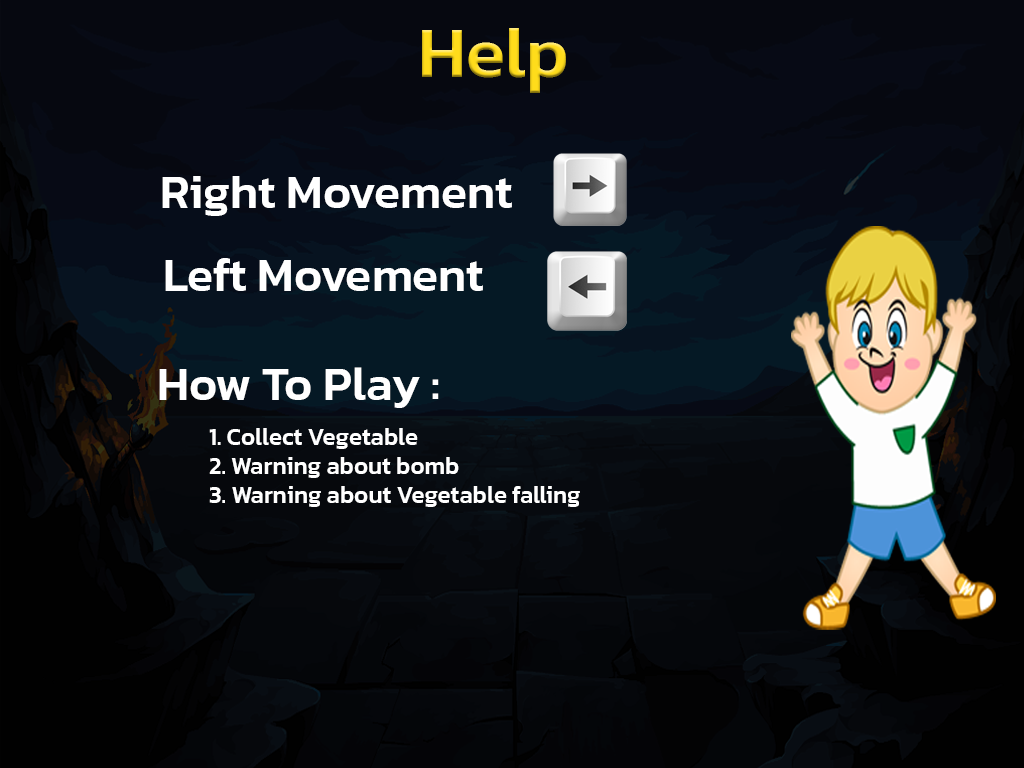
<style>
.page{position:relative;width:1024px;height:768px}
.page>*{position:absolute;margin:0}
.t1{font:72px "Kanit-Medium";color:#ffdc1b}
.t2{font:48px "Kanit-Medium";color:#ffffff}
.t3{font:24px "Kanit-Medium";color:#ffffff}
</style>
<div class="page">
<p class="t1" style="left:422px;top:28px;width:144px;height:65px">Help</p>
<p class="t2" style="left:162px;top:176px;width:350px;height:40px">Right Movement</p>
<p class="t2" style="left:165px;top:258px;width:318px;height:33px">Left Movement</p>
<p class="t2" style="left:159px;top:367px;width:280px;height:41px">How To Play :</p>
<p class="t3" style="left:209px;top:428px;width:371px;height:79px">1. Collect Vegetable<br>2. Warning about bomb<br>3. Warning about Vegetable falling</p>
</div>
